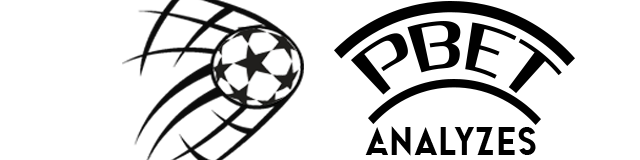
<style>
.page{position:relative;width:640px;height:160px;background:#ffffff}
.page>*{position:absolute;margin:0}
.t1{font:66.8px "ZrnicRg-Regular";color:#000000}
.t2{font:33.4px "Warzone-Regular";color:#000000}
</style>
<div class="page">
<p class="t1" style="left:351px;top:21px;width:211px;height:74px;rotate:3deg">PBET</p>
<p class="t2" style="left:365px;top:126px;width:171px;height:30px">Analyzes</p>
</div>
